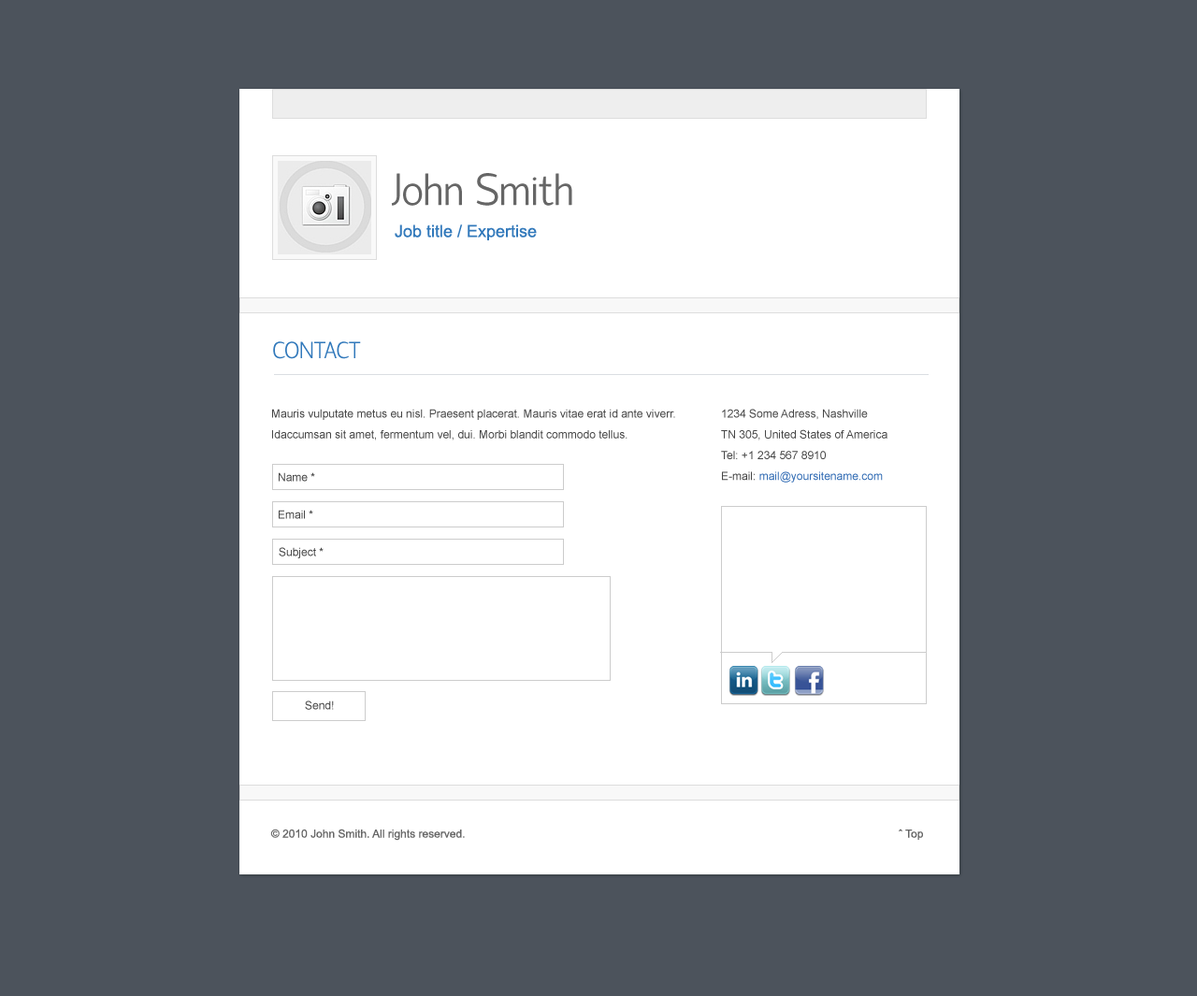
<style>
.page{position:relative;width:1197px;height:996px;background:#4c535c}
.page>*{position:absolute;margin:0}
.t1{font:44.9px "MyriadPro-Regular";color:#666666}
.t2{font:16.8px "ArialMT";color:#3279bb}
.t3{font:23.4px "MyriadPro-Regular";color:#3279bb}
.t4{font:11.2px/20.8px "ArialMT";color:#454545}
.t5{font:11.2px/20.8px "ArialMT";color:#2f6ab3}
.t6{font:11.2px "ArialMT";color:#454545}
.t7{font:11.2px "ArialMT";color:#666666}
</style>
<div class="page">
<p class="t1" style="left:391px;top:173px;width:181px;height:33px">John Smith</p>
<p class="t2" style="left:395px;top:224px;width:142px;height:16px">Job title / Expertise</p>
<p class="t3" style="left:273px;top:341px;width:88px;height:18px">CONTACT</p>
<p class="t4" style="left:272px;top:409px;width:403px;height:32px">Mauris vulputate metus eu nisl. Praesent placerat. Mauris vitae erat id ante viverr. <br>Idaccumsan sit amet, fermentum vel, dui. Morbi blandit commodo tellus.</p>
<p class="t4" style="left:721px;top:409px;width:167px;height:74px">1234 Some Adress, Nashville<br>TN 305, United States of America<br>Tel: +1 234 567 8910<br>E-mail:<span class="t5"> mail@yoursitename.com</span></p>
<p class="t6" style="left:279px;top:472px;width:36px;height:10px">Name *</p>
<p class="t6" style="left:279px;top:510px;width:34px;height:9px">Email *</p>
<p class="t6" style="left:279px;top:547px;width:45px;height:11px">Subject *</p>
<p class="t6" style="left:305px;top:701px;width:29px;height:9px">Send!</p>
<p class="t7" style="left:270px;top:829px;width:195px;height:12px">© 2010 John Smith. All rights reserved.</p>
<p class="t7" style="left:899px;top:829px;width:24px;height:11px">ˆ Top</p>
</div>
